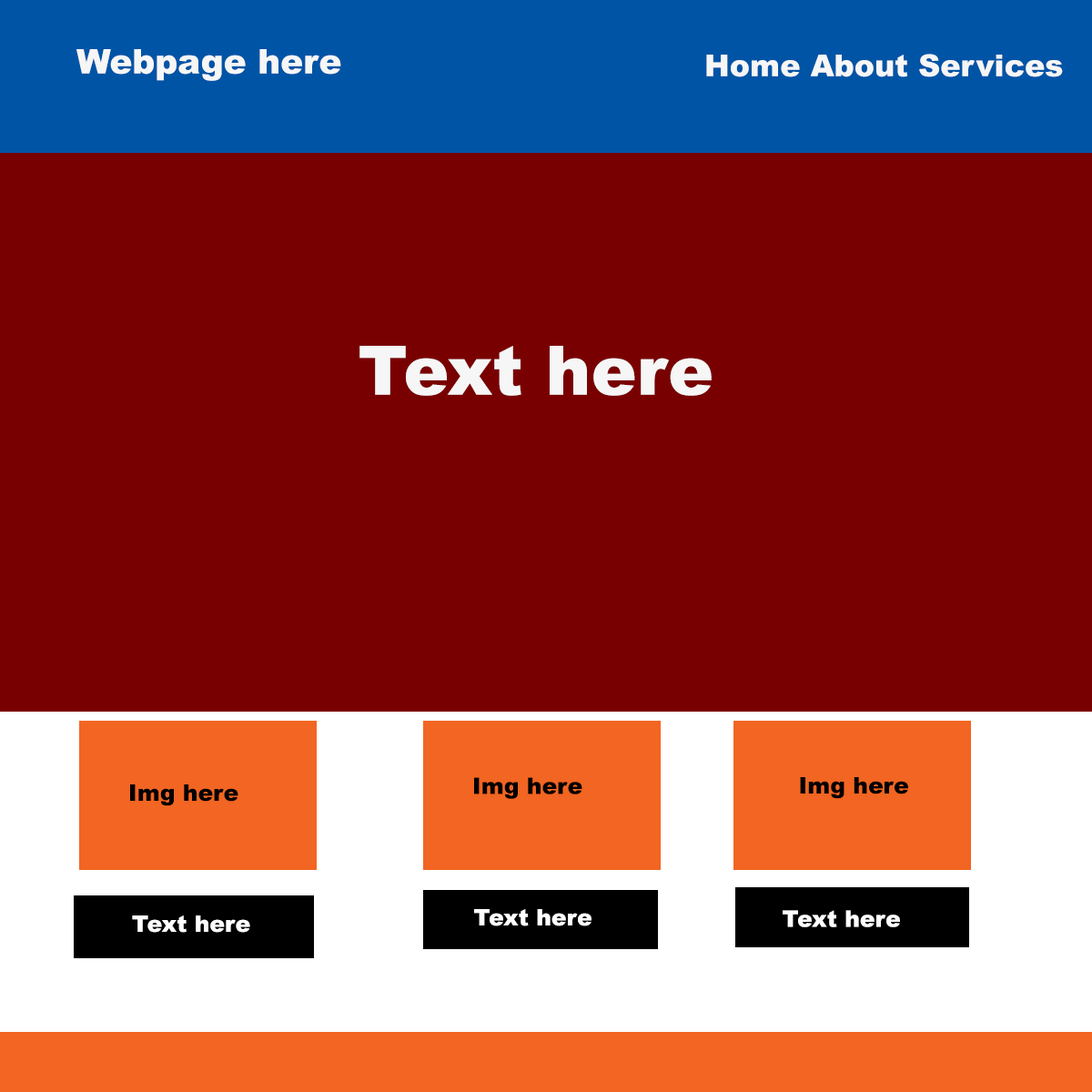
<style>
.page{position:relative;width:1092px;height:1092px;background:#790000}
.page>*{position:absolute;margin:0}
.t1{font:34.1px "Arial-Black";color:#f6f6f6}
.t2{font:30.3px "Arial-Black";color:#f6f6f6}
.t3{font:68.2px "Arial-Black";color:#f6f6f6}
.t4{font:22.7px "Arial-Black";color:#000000}
.t5{font:22.7px "Arial-Black";color:#ffffff}
</style>
<div class="page">
<p class="t1" style="left:76px;top:49px;width:265px;height:32px">Webpage here</p>
<p class="t2" style="left:706px;top:54px;width:357px;height:23px">Home About Services</p>
<p class="t3" style="left:359px;top:346px;width:353px;height:50px">Text here</p>
<p class="t4" style="left:130px;top:784px;width:108px;height:22px">Img here</p>
<p class="t4" style="left:474px;top:777px;width:108px;height:22px">Img here</p>
<p class="t4" style="left:800px;top:777px;width:108px;height:22px">Img here</p>
<p class="t5" style="left:132px;top:915px;width:118px;height:18px">Text here</p>
<p class="t5" style="left:474px;top:909px;width:117px;height:17px">Text here</p>
<p class="t5" style="left:783px;top:910px;width:117px;height:17px">Text here</p>
</div>
